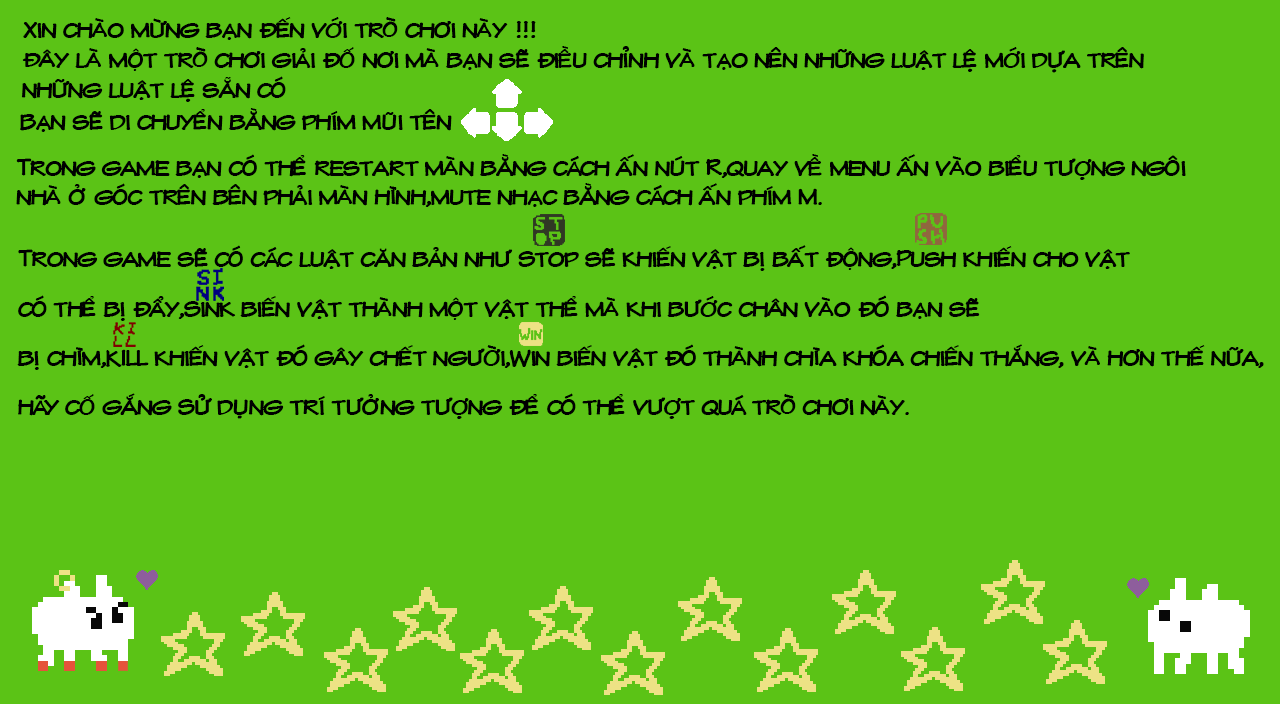
<style>
.page{position:relative;width:1280px;height:704px;background:#5bc316}
.page>*{position:absolute;margin:0}
.t1{font:24.7px "MTOCOMIC-Regular";color:#000000}
.t2{font:24.7px/49.4px "MTOCOMIC-Regular";color:#000000}
</style>
<div class="page">
<p class="t1" style="left:23px;top:17px;width:513px;height:23px">Xin chào mừng bạn đến với trò chơi này !!!</p>
<p class="t1" style="left:21px;top:46px;width:1123px;height:56px">Đây là một trò chơi giải đố nơi mà bạn sẽ điều chỉnh và tạo nên những luật lệ mới dựa trên<br>những luật lệ sẵn có</p>
<p class="t1" style="left:20px;top:108px;width:432px;height:24px">Bạn sẽ di chuyển bằng phím mũi tên</p>
<p class="t1" style="left:16px;top:154px;width:1170px;height:53px">Trong game bạn có thể restart màn bằng cách ấn nút R,quay về menu ấn vào biểu tượng ngôi<br>nhà ở góc trên bên phải màn hình,mute nhạc bằng cách ấn phím M.</p>
<p class="t2" style="left:17px;top:245px;width:1247px;height:174px">Trong game sẽ có các luật căn bản như Stop sẽ khiến vật bị bất động,Push khiến cho vật<br>có thể bị đẩy,Sink biến vật thành một vật thể mà khi bước chân vào đó bạn sẽ<br>bị chìm,KILL khiến vật đó gây chết người,Win biến vật đó thành chìa khóa chiến thắng, và hơn thế nữa,<br>hãy cố gắng Sử dụng trí tưởng tượng để có thể vượt quá trò chơi này.</p>
</div>
